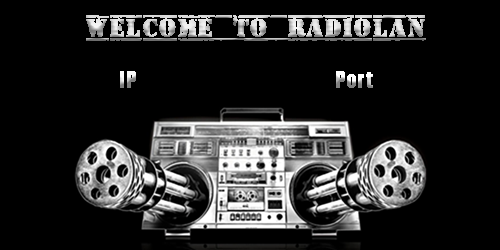
<style>
.page{position:relative;width:500px;height:250px;background:#000000}
.page>*{position:absolute;margin:0}
.t1{font:25px "OldStamper";font-weight:bold}
.t2{font:20px "Impact";font-weight:bold}
</style>
<div class="page">
<p class="t1" style="left:86px;top:15px;width:340px;height:26px">Welcome to RadioLan</p>
<p class="t2" style="left:120px;top:71px;width:253px;height:17px">IP      Port</p>
</div>
